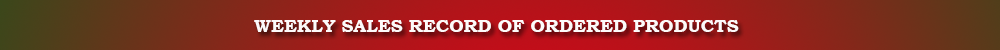
<style>
.page{position:relative;width:1000px;height:50px}
.page>*{position:absolute;margin:0}
.t1{font:18px "BookmanOldStyle-Bold";color:#fdfafa}
</style>
<div class="page">
<p class="t1" style="left:254px;top:20px;width:485px;height:12px">WEEKLY SALES RECORD OF ORDERED PRODUCTS</p>
</div>
